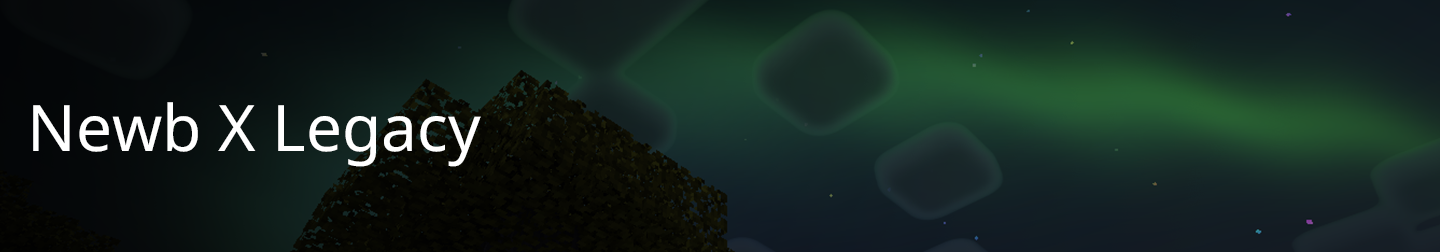
<style>
.page{position:relative;width:1440px;height:252px}
.page>*{position:absolute;margin:0}
.t1{font:64px "NotoSans-Regular";color:#ffffff}
</style>
<div class="page">
<p class="t1" style="left:33px;top:102px;width:448px;height:65px">Newb X Legacy</p>
</div>
